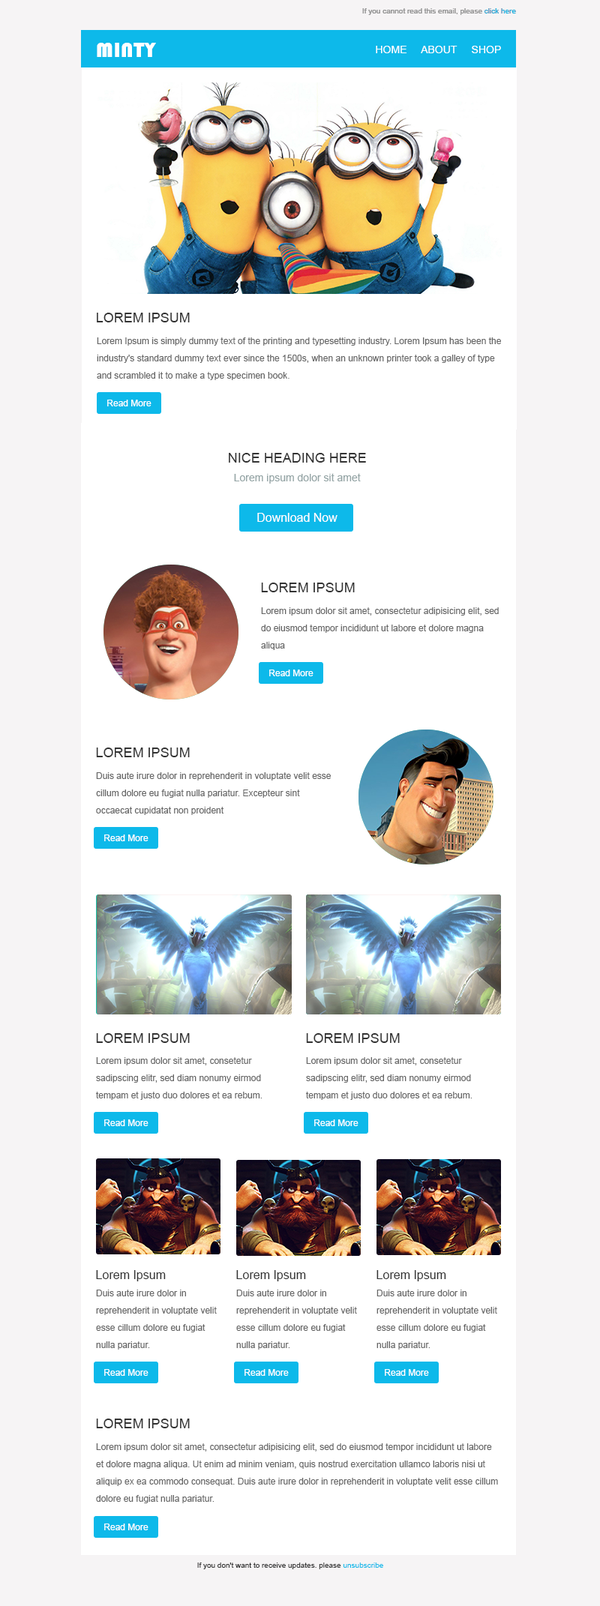
<style>
.page{position:relative;width:600px;height:1606px;background:#ffffff}
.page>*{position:absolute;margin:0}
.t1{font:7.5px "ArialMT";color:#999999}
.t2{font:7.5px "ArialMT";color:#e84c3d}
.t3{font:7.5px "ArialMT";color:#0db9ea}
.t4{font:21px "Bauhaus93";letter-spacing:0.02em;color:#ffffff;text-transform:uppercase}
.t5{font:10.5px "ArialMT";color:#ffffff;text-transform:uppercase}
.t6{font:13.5px "ArialMT";color:#333333;text-transform:uppercase}
.t7{font:9px/17.2px "ArialMT";color:#666666}
.t8{font:9px "ArialMT";color:#ffffff}
.t9{font:10.5px "ArialMT";color:#95a5a6}
.t10{font:12px "ArialMT";color:#ffffff}
.t11{font:12px "ArialMT";color:#333333}
.t12{font:7.5px "ArialMT";color:#333333}
</style>
<div class="page">
<p class="t1" style="left:362px;top:8px;width:154px;height:7px">If you cannot read this email, please <span class="t2">click here</span></p>
<p class="t1" style="left:362px;top:8px;width:154px;height:7px">If you cannot read this email, please <span class="t3">click here</span></p>
<p class="t4" style="left:97px;top:43px;width:59px;height:14px">minty</p>
<p class="t4" style="left:97px;top:43px;width:59px;height:14px">minty</p>
<p class="t5" style="left:376px;top:46px;width:125px;height:7px">HOME     ABOUT     SHOP</p>
<p class="t5" style="left:376px;top:46px;width:125px;height:7px">HOME     ABOUT     SHOP</p>
<p class="t6" style="left:97px;top:313px;width:93px;height:9px">Lorem Ipsum</p>
<p class="t7" style="left:97px;top:338px;width:404px;height:42px">Lorem Ipsum is simply dummy text of the printing and typesetting industry. Lorem Ipsum has been the industry's standard dummy text ever since the 1500s, when an unknown printer took a galley of type and scrambled it to make a type specimen book. <br>It has survived not only five centuries, but also the leap into electronic typesetting, remaining essentially unchanged.</p>
<p class="t8" style="left:107px;top:400px;width:45px;height:6px">Read More</p>
<p class="t6" style="left:229px;top:453px;width:137px;height:10px">Nice heading here</p>
<p class="t9" style="left:234px;top:473px;width:127px;height:11px">Lorem ipsum dolor sit amet</p>
<p class="t10" style="left:257px;top:513px;width:81px;height:9px">Download Now</p>
<p class="t6" style="left:261px;top:583px;width:94px;height:9px">Lorem Ipsum</p>
<p class="t7" style="left:261px;top:608px;width:238px;height:42px">Lorem ipsum dolor sit amet, consectetur adipisicing elit, sed do eiusmod tempor incididunt ut labore et dolore magna aliqua</p>
<p class="t8" style="left:269px;top:670px;width:45px;height:6px">Read More</p>
<p class="t6" style="left:96px;top:748px;width:94px;height:10px">Lorem Ipsum</p>
<p class="t7" style="left:96px;top:772px;width:235px;height:43px">Duis aute irure dolor in reprehenderit in voluptate velit esse cillum dolore eu fugiat nulla pariatur. Excepteur sint occaecat cupidatat non proident</p>
<p class="t8" style="left:104px;top:835px;width:44px;height:7px">Read More</p>
<p class="t6" style="left:96px;top:1034px;width:94px;height:9px">Lorem Ipsum</p>
<p class="t6" style="left:306px;top:1034px;width:94px;height:9px">Lorem Ipsum</p>
<p class="t7" style="left:96px;top:1058px;width:166px;height:42px">Lorem ipsum dolor sit amet, consetetur sadipscing elitr, sed diam nonumy eirmod tempam et justo duo dolores et ea rebum.</p>
<p class="t7" style="left:306px;top:1058px;width:166px;height:42px">Lorem ipsum dolor sit amet, consetetur sadipscing elitr, sed diam nonumy eirmod tempam et justo duo dolores et ea rebum.</p>
<p class="t8" style="left:104px;top:1120px;width:44px;height:6px">Read More</p>
<p class="t8" style="left:314px;top:1120px;width:44px;height:6px">Read More</p>
<p class="t11" style="left:96px;top:1270px;width:70px;height:12px">Lorem Ipsum</p>
<p class="t11" style="left:236px;top:1270px;width:70px;height:12px">Lorem Ipsum</p>
<p class="t11" style="left:376px;top:1270px;width:70px;height:12px">Lorem Ipsum</p>
<p class="t7" style="left:96px;top:1290px;width:121px;height:60px">Duis aute irure dolor in reprehenderit in voluptate velit esse cillum dolore eu fugiat nulla pariatur.</p>
<p class="t7" style="left:236px;top:1290px;width:121px;height:60px">Duis aute irure dolor in reprehenderit in voluptate velit esse cillum dolore eu fugiat nulla pariatur.</p>
<p class="t7" style="left:376px;top:1290px;width:121px;height:60px">Duis aute irure dolor in reprehenderit in voluptate velit esse cillum dolore eu fugiat nulla pariatur.</p>
<p class="t8" style="left:104px;top:1370px;width:44px;height:6px">Read More</p>
<p class="t8" style="left:244px;top:1370px;width:45px;height:6px">Read More</p>
<p class="t8" style="left:385px;top:1370px;width:44px;height:6px">Read More</p>
<p class="t6" style="left:96px;top:1419px;width:94px;height:10px">Lorem Ipsum</p>
<p class="t7" style="left:96px;top:1444px;width:402px;height:60px">Lorem ipsum dolor sit amet, consectetur adipisicing elit, sed do eiusmod tempor incididunt ut labore et dolore magna aliqua. Ut enim ad minim veniam, quis nostrud exercitation ullamco laboris nisi ut aliquip ex ea commodo consequat. Duis aute irure dolor in reprehenderit in voluptate velit esse cillum dolore eu fugiat nulla pariatur.</p>
<p class="t8" style="left:104px;top:1524px;width:44px;height:7px">Read More</p>
<p class="t12" style="left:197px;top:1563px;width:186px;height:7px">If you don't want to receive updates. please <span class="t3">unsubscribe</span></p>
</div>
